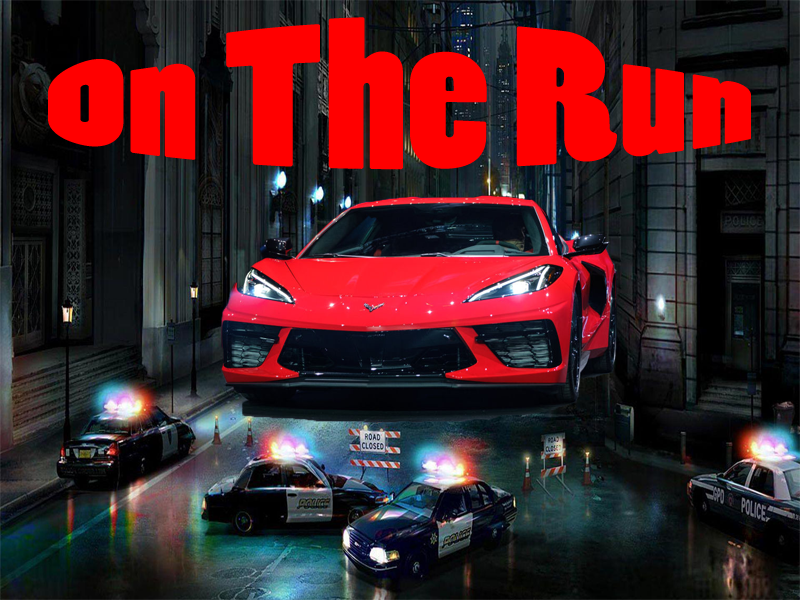
<style>
.page{position:relative;width:800px;height:600px}
.page>*{position:absolute;margin:0}
.t1{font:85.8px "PoplarStd";color:#ff0000;scale:2.36 1}
</style>
<div class="page">
<p class="t1" style="left:48px;top:17px;width:703px;height:153px">On The Run</p>
</div>
